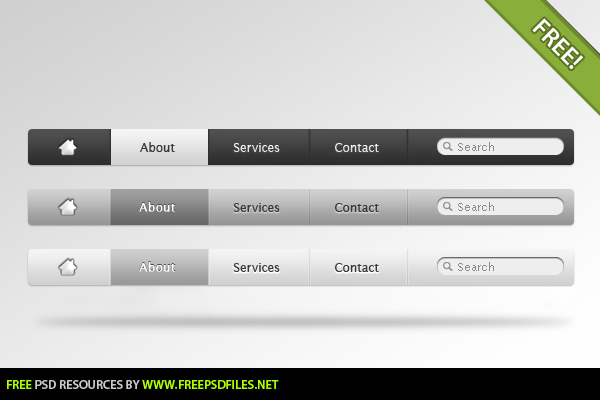
<style>
.page{position:relative;width:600px;height:400px}
.page>*{position:absolute;margin:0}
.t1{font:12px "LucidaSans";color:#383838}
.t2{font:12px "LucidaSans";color:#e3e3e3}
.t3{font:11px "LucidaSans";color:#8a8a8a}
.t4{font:12px "LucidaSans";font-weight:bold}
</style>
<div class="page">
<p class="t1" style="left:140px;top:142px;width:35px;height:10px">About</p>
<p class="t2" style="left:233px;top:143px;width:47px;height:9px">Services</p>
<p class="t2" style="left:335px;top:143px;width:44px;height:9px">Contact</p>
<p class="t3" style="left:458px;top:142px;width:36px;height:9px">Search</p>
<p class="t4" style="left:139px;top:201px;width:37px;height:11px">About</p>
<p class="t1" style="left:233px;top:203px;width:47px;height:9px">Services</p>
<p class="t1" style="left:335px;top:203px;width:44px;height:9px">Contact</p>
<p class="t3" style="left:458px;top:202px;width:36px;height:9px">Search</p>
<p class="t1" style="left:233px;top:263px;width:47px;height:9px">Services</p>
<p class="t1" style="left:335px;top:263px;width:44px;height:9px">Contact</p>
<p class="t3" style="left:458px;top:262px;width:36px;height:9px">Search</p>
</div>
